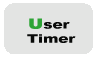
<style>
.page{position:relative;width:97px;height:59px;background:#e3e4e3}
.page>*{position:absolute;margin:0}
.t1{font:12px "Arial-Black";color:#090a09;scale:1.26 1}
.t2{font:11.6px "Arial-Black";color:#f70c0c;font-weight:bold;scale:1.26 1}
.t3{font:14px "Arial-Black";color:#2ea436;font-weight:bold;scale:1.26 1}
</style>
<div class="page">
<p class="t1" style="left:27px;top:18px;width:49px;height:25px;text-align:justify"><span class="t2"><br></span><span class="t3">U</span>ser<br> Timer</p>
</div>
